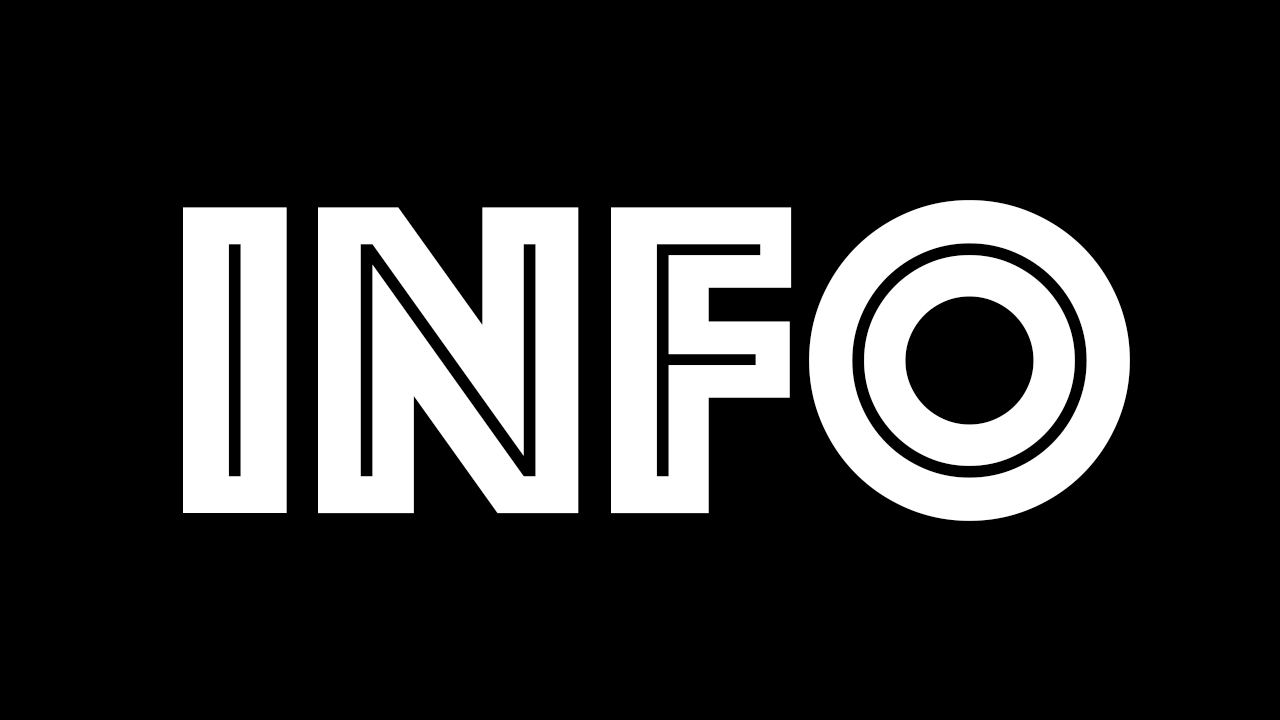
<style>
.page{position:relative;width:1280px;height:720px;background:#000000}
.page>*{position:absolute;margin:0}
.t1{font:458.3px "Phosphate-Inline";color:#ffffff}
</style>
<div class="page">
<p class="t1" style="left:183px;top:200px;width:947px;height:321px">info</p>
</div>
